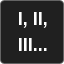
<style>
.page{position:relative;width:64px;height:64px;background:#202020}
.page>*{position:absolute;margin:0}
.t1{font:18px/25.6px "Arial-BoldMT";color:#ffffff}
</style>
<div class="page">
<p class="t1" style="left:19px;top:12px;width:28px;height:39px">I, II,<br>III...</p>
</div>
